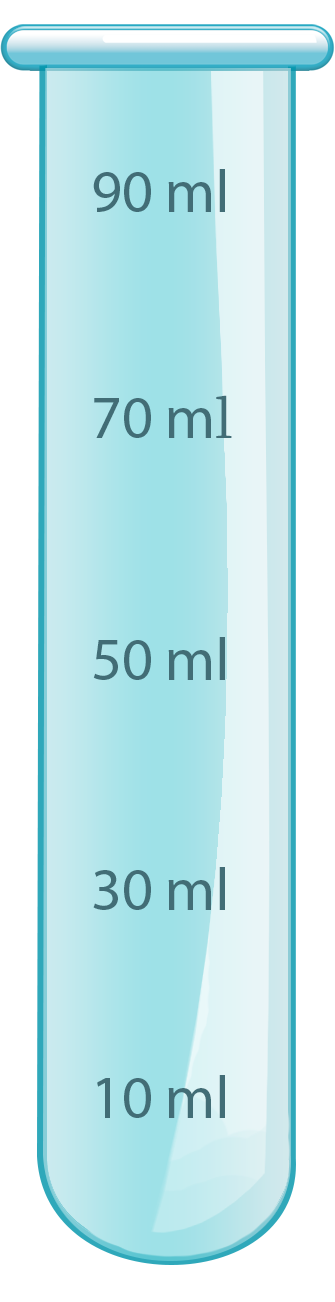
<style>
.page{position:relative;width:335px;height:1302px;background:#ffffff}
.page>*{position:absolute;margin:0}
.t1{font:60px "MyriadPro-Regular";color:#426d76}
.t2{font:60px "Sylfaen";color:#426d76}
</style>
<div class="page">
<p class="t1" style="left:93px;top:169px;width:132px;height:43px">90 ml</p>
<p class="t1" style="left:94px;top:395px;width:138px;height:43px">70 m<span class="t2">l</span></p>
<p class="t1" style="left:93px;top:637px;width:132px;height:43px">50 ml</p>
<p class="t1" style="left:93px;top:867px;width:132px;height:43px">30 ml</p>
<p class="t1" style="left:97px;top:1075px;width:128px;height:43px">10 ml</p>
</div>
